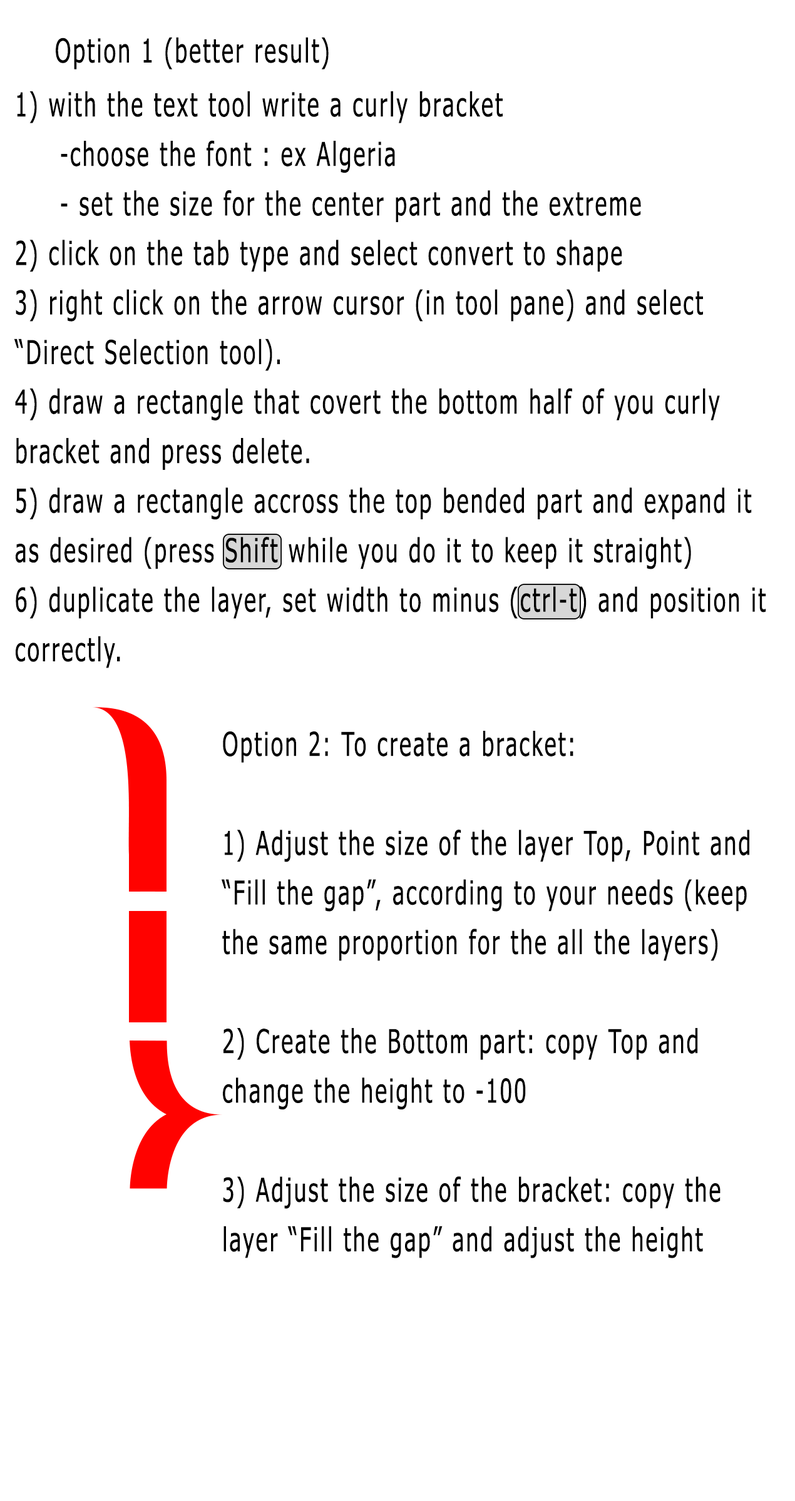
<style>
.page{position:relative;width:795px;height:1501px;background:#ffffff}
.page>*{position:absolute;margin:0}
.t1{font:33px "Tahoma";letter-spacing:0.09em;color:#000000;scale:0.68 1}
.t2{font:33px/49.5px "Tahoma";letter-spacing:0.09em;color:#000000;scale:0.68 1}
</style>
<div class="page">
<p class="t1" style="left:56px;top:37px;width:272px;height:32px">Option 1 (better result)</p>
<p class="t2" style="left:14px;top:91px;width:752px;height:577px">1) with the text tool write a curly bracket <br>  -choose the font : ex Algeria<br>  - set the size for the center part and the extreme<br>2) click on the tab type and select convert to shape<br>3) right click on the arrow cursor (in tool pane) and select “Direct Selection tool).<br>4) draw a rectangle that covert the bottom half of you curly bracket and press delete.<br>5) draw a rectangle accross the top bended part and expand it as desired (press Shift while you do it to keep it straight)<br>6) duplicate the layer, set width to minus (ctrl-t) and position it correctly.</p>
<p class="t2" style="left:221px;top:731px;width:528px;height:527px">Option 2: To create a bracket:<br><br>1) Adjust the size of the layer Top, Point and “Fill the gap”, according to your needs (keep the same proportion for the all the layers)<br><br>2) Create the Bottom part: copy Top and change the height to -100<br><br>3) Adjust the size of the bracket: copy the layer “Fill the gap” and adjust the height</p>
</div>
